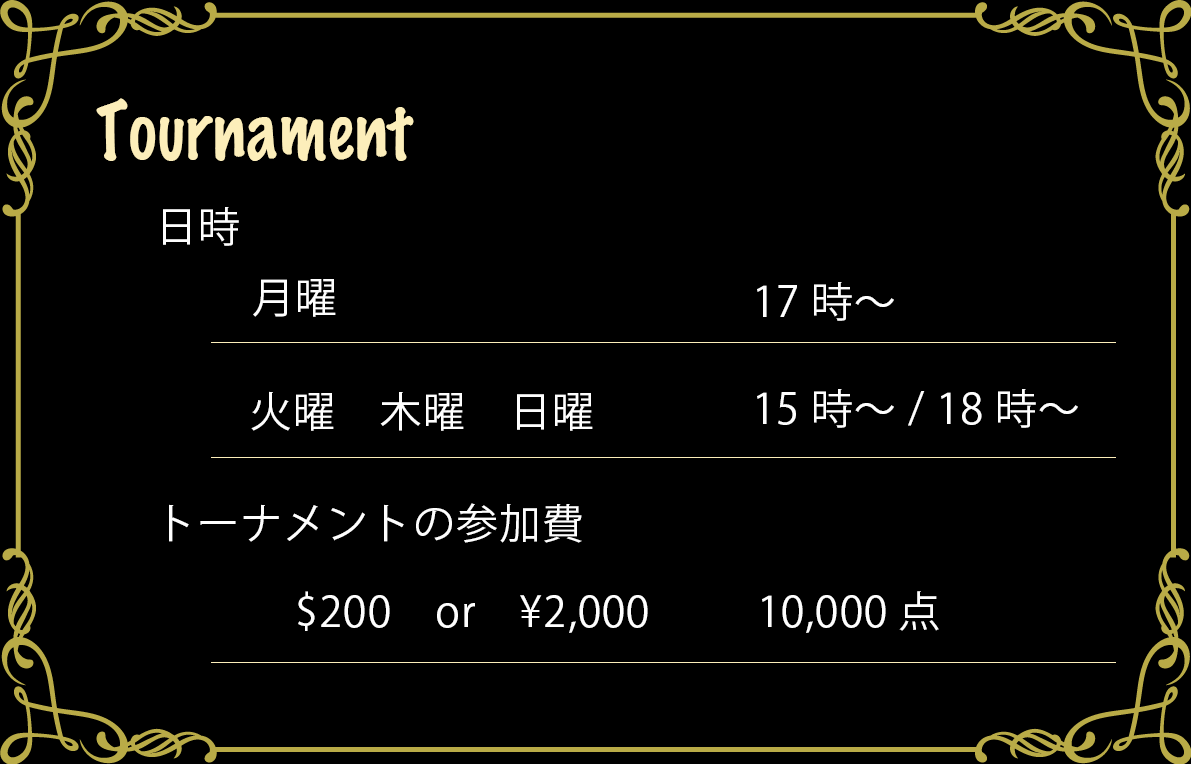
<style>
.page{position:relative;width:1191px;height:764px;background:#000000}
.page>*{position:absolute;margin:0}
.t1{font:72.6px "MarkerFelt-Thin";letter-spacing:0.025em;color:#fceeba;scale:0.91 1}
.t2{font:42px "KozGoPr6N-Regular";letter-spacing:0.025em;color:#fefefe}
</style>
<div class="page">
<p class="t1" style="left:96px;top:98px;width:318px;height:63px">Tournament</p>
<p class="t2" style="left:163px;top:207px;width:76px;height:39px">日時</p>
<p class="t2" style="left:253px;top:279px;width:83px;height:38px">月曜</p>
<p class="t2" style="left:757px;top:282px;width:137px;height:39px">17時〜</p>
<p class="t2" style="left:757px;top:389px;width:321px;height:39px">15時〜 / 18時〜</p>
<p class="t2" style="left:251px;top:391px;width:342px;height:40px">火曜　木曜　日曜</p>
<p class="t2" style="left:169px;top:503px;width:413px;height:40px">トーナメントの参加費</p>
<p class="t2" style="left:298px;top:591px;width:350px;height:42px">$200　or　¥2,000</p>
<p class="t2" style="left:762px;top:591px;width:177px;height:42px">10,000点</p>
</div>
